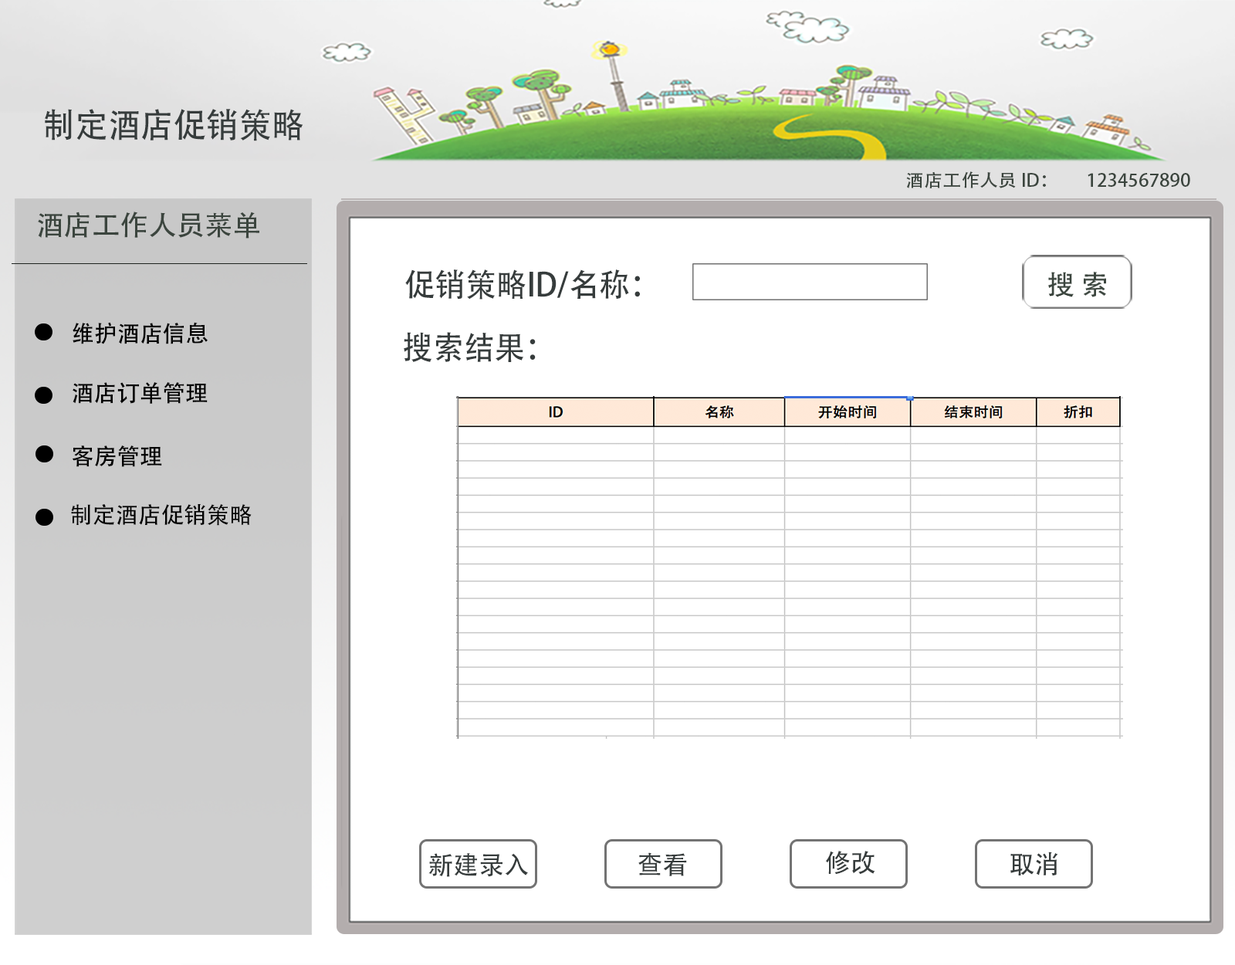
<style>
.page{position:relative;width:1235px;height:965px;background:#ffffff}
.page>*{position:absolute;margin:0}
.t1{font:34.3px "AdobeHeitiStd-Regular";letter-spacing:-0.005em;color:#363c3c;text-transform:uppercase;scale:0.96 1}
.t2{font:17.8px "AdobeHeitiStd-Regular";color:#3b453e;scale:1.04 1}
.t3{font:28.1px "AdobeHeitiStd-Regular";color:#3b453e}
.t4{font:32.2px "AdobeHeitiStd-Regular";letter-spacing:-0.005em;color:#363c3c;text-transform:uppercase;scale:0.96 1}
.t5{font:22.8px "AdobeHeitiStd-Regular";color:#010101}
.t6{font:22.8px "AdobeHeitiStd-Regular";color:#000000}
.t7{font:22.8px "AdobeHeitiStd-Regular";letter-spacing:-0.005em;color:#000000;text-transform:uppercase}
</style>
<div class="page">
<p class="t1" style="left:45px;top:109px;width:258px;height:32px">制定酒店促销策略</p>
<p class="t2" style="left:907px;top:171px;width:284px;height:17px">酒店工作人员ID：        1234567890</p>
<p class="t3" style="left:38px;top:212px;width:221px;height:27px">酒店工作人员菜单</p>
<p class="t4" style="left:405px;top:269px;width:235px;height:31px">促销策略ID/名称：</p>
<p class="t5" style="left:73px;top:322px;width:135px;height:22px">维护酒店信息</p>
<p class="t4" style="left:404px;top:332px;width:132px;height:30px">搜索结果：</p>
<p class="t6" style="left:73px;top:382px;width:135px;height:22px">酒店订单管理</p>
<p class="t6" style="left:73px;top:446px;width:89px;height:21px">客房管理</p>
<p class="t7" style="left:71px;top:504px;width:181px;height:22px">制定酒店促销策略</p>
</div>
